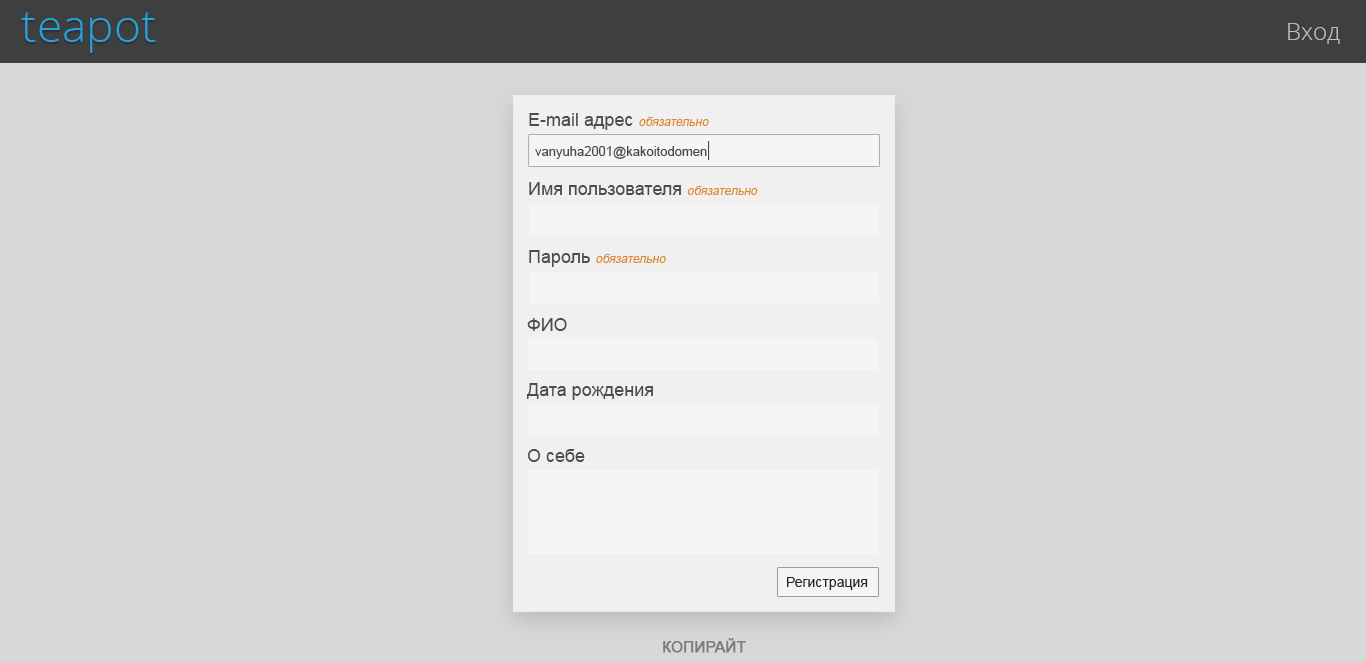
<style>
.page{position:relative;width:1366px;height:662px;background:#d9d8d9}
.page>*{position:absolute;margin:0}
.t1{font:46px "OpenSans-Light";color:#299fdc}
.t2{font:24px "OpenSans-Light";color:#bdbbbb}
.t3{font:18px "ArialMT";color:#4c4c4c}
.t4{font:12px "ArialMT";color:#dc8a29;font-style:italic}
.t5{font:13px "ArialMT";color:#474747}
.t6{font:20px "ArialMT";color:#474747;scale:0.51 1}
.t7{font:14px "ArialMT";color:#242424}
.t8{font:15px "ArialMT";color:#7b7a7a;font-weight:bold}
</style>
<div class="page">
<p class="t1" style="left:21px;top:12px;width:135px;height:41px">teapot</p>
<p class="t2" style="left:1288px;top:23px;width:52px;height:21px">Вход</p>
<p class="t3" style="left:529px;top:113px;width:180px;height:17px">E-mail адрес <span class="t4">обязательно</span></p>
<p class="t5" style="left:535px;top:141px;width:175px;height:19px">vanyuha2001@kakoitodomen<span class="t6">|</span></p>
<p class="t3" style="left:529px;top:182px;width:229px;height:13px">Имя пользователя <span class="t4">обязательно</span></p>
<p class="t4" style="left:529px;top:250px;width:137px;height:17px"><span class="t3">Пароль </span>обязательно</p>
<p class="t3" style="left:527px;top:318px;width:40px;height:13px">ФИО</p>
<p class="t3" style="left:526px;top:383px;width:127px;height:17px">Дата рождения</p>
<p class="t3" style="left:527px;top:449px;width:58px;height:13px">О себе</p>
<p class="t7" style="left:787px;top:577px;width:81px;height:13px">Регистрация</p>
<p class="t8" style="left:663px;top:638px;width:83px;height:15px">КОПИРАЙТ</p>
</div>
